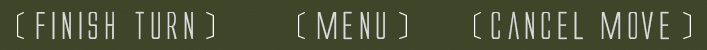
<style>
.page{position:relative;width:707px;height:50px;background:#3e4529}
.page>*{position:absolute;margin:0}
.t1{font:36px "AlienLeague";color:#dbdada}
</style>
<div class="page">
<p class="t1" style="left:36px;top:11px;width:157px;height:29px">finish turn</p>
<p class="t1" style="left:317px;top:11px;width:68px;height:29px">menu</p>
<p class="t1" style="left:491px;top:11px;width:178px;height:29px">cancel move</p>
</div>
